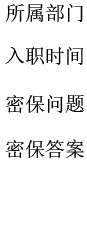
<style>
.page{position:relative;width:87px;height:251px;background:#ffffff}
.page>*{position:absolute;margin:0}
.t1{font:20px "NSimSun";color:#000000}
</style>
<div class="page">
<p class="t1" style="left:5px;top:4px;width:78px;height:18px">所属部门</p>
<p class="t1" style="left:5px;top:47px;width:79px;height:18px">入职时间</p>
<p class="t1" style="left:5px;top:95px;width:80px;height:18px">密保问题</p>
<p class="t1" style="left:5px;top:139px;width:79px;height:19px">密保答案</p>
</div>
